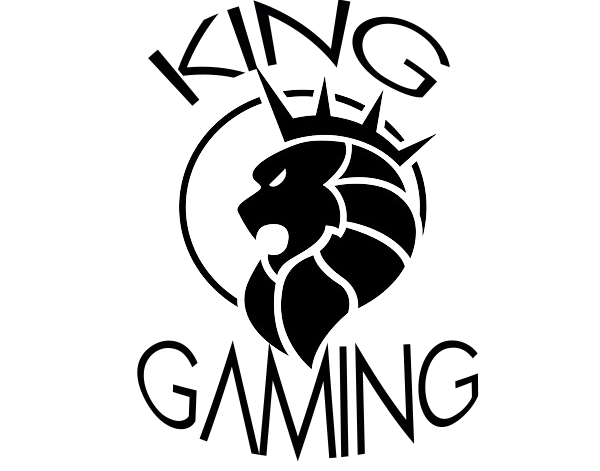
<style>
.page{position:relative;width:600px;height:471px;background:#ffffff}
.page>*{position:absolute;margin:0}
.t1{font:89px "Pasajero";color:#020204}
</style>
<div class="page">
<p class="t1" style="left:148px;top:0px;width:302px;height:106px">KING</p>
<p class="t1" style="left:137px;top:340px;width:342px;height:122px">GAMING</p>
</div>
